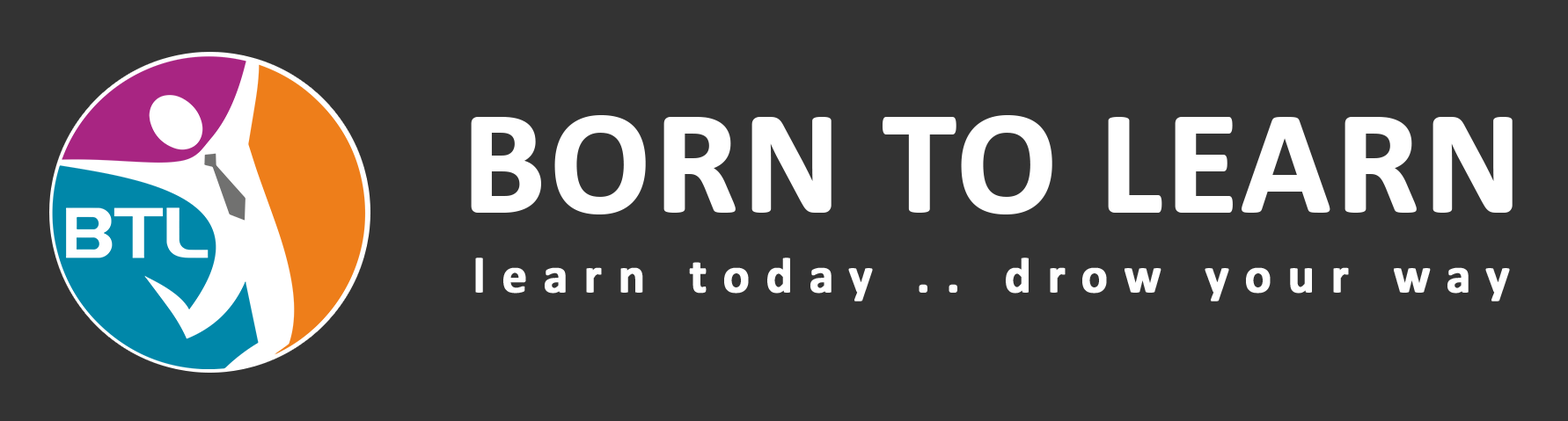
<style>
.page{position:relative;width:1568px;height:421px;background:#333333}
.page>*{position:absolute;margin:0}
.t1{font:149.1px "Calibri-Bold";color:#ffffff;font-weight:bold}
.t2{font:50.1px "Calibri-Bold";letter-spacing:0.31em;color:#ffffff;font-weight:bold}
</style>
<div class="page">
<p class="t1" style="left:471px;top:115px;width:1042px;height:100px">BORN TO LEARN</p>
<p class="t2" style="left:475px;top:258px;width:1035px;height:44px">learn today .. drow your way</p>
</div>
